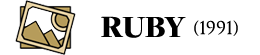
<style>
.page{position:relative;width:260px;height:55px;background:#ffffff}
.page>*{position:absolute;margin:0}
.t1{font:32px "FreightDispProBlack-Regular";color:#000000}
.t2{font:17px "TrajanPro3-Regular";color:#000000}
</style>
<div class="page">
<p class="t1" style="left:101px;top:16px;width:85px;height:22px">RUBY</p>
<p class="t2" style="left:194px;top:20px;width:44px;height:16px">(1991)</p>
</div>
